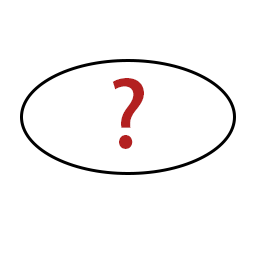
<style>
.page{position:relative;width:256px;height:256px;background:#ffffff}
.page>*{position:absolute;margin:0}
.t1{font:90px "AdobeFanHeitiStd-Bold";color:#b32020}
</style>
<div class="page">
<p class="t1" style="left:112px;top:78px;width:32px;height:71px">?</p>
</div>
